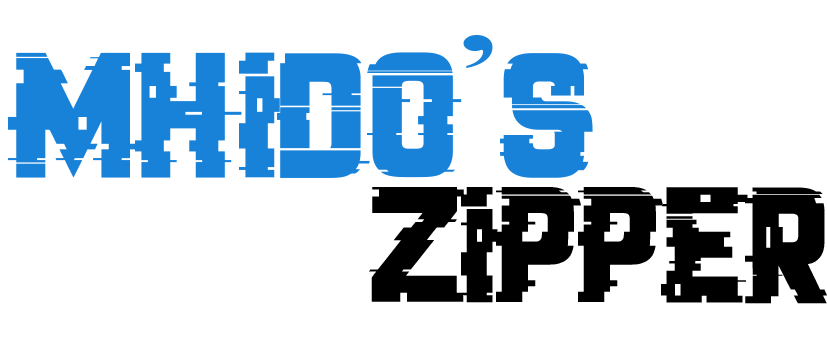
<style>
.page{position:relative;width:827px;height:354px;background:#ffffff}
.page>*{position:absolute;margin:0}
.t1{font:101.9px "TimesNewRomanPS-BoldMT";color:#1882d9;scale:1.53 1}
.t2{font:98.2px "CrackedCode";color:#1882d9}
.t3{font:90.5px "CrackedCode";color:#000000}
</style>
<div class="page">
<p class="t1" style="left:463px;top:35px;width:30px;height:33px">’</p>
<p class="t2" style="left:8px;top:52px;width:585px;height:126px">MHIDO S</p>
<p class="t3" style="left:369px;top:187px;width:458px;height:117px">ZIPPER</p>
</div>
